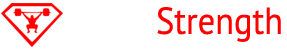
<style>
.page{position:relative;width:287px;height:49px;background:#ffffff}
.page>*{position:absolute;margin:0}
.t1{font:37.4px "PTSans-Regular";color:#ff0000;scale:0.92 1}
.t2{font:37.4px "PTSans-Regular";color:#ffffff;scale:0.92 1}
</style>
<div class="page">
<p class="t1" style="left:73px;top:7px;width:208px;height:35px"><span class="t2">Inner</span> Strength</p>
</div>
